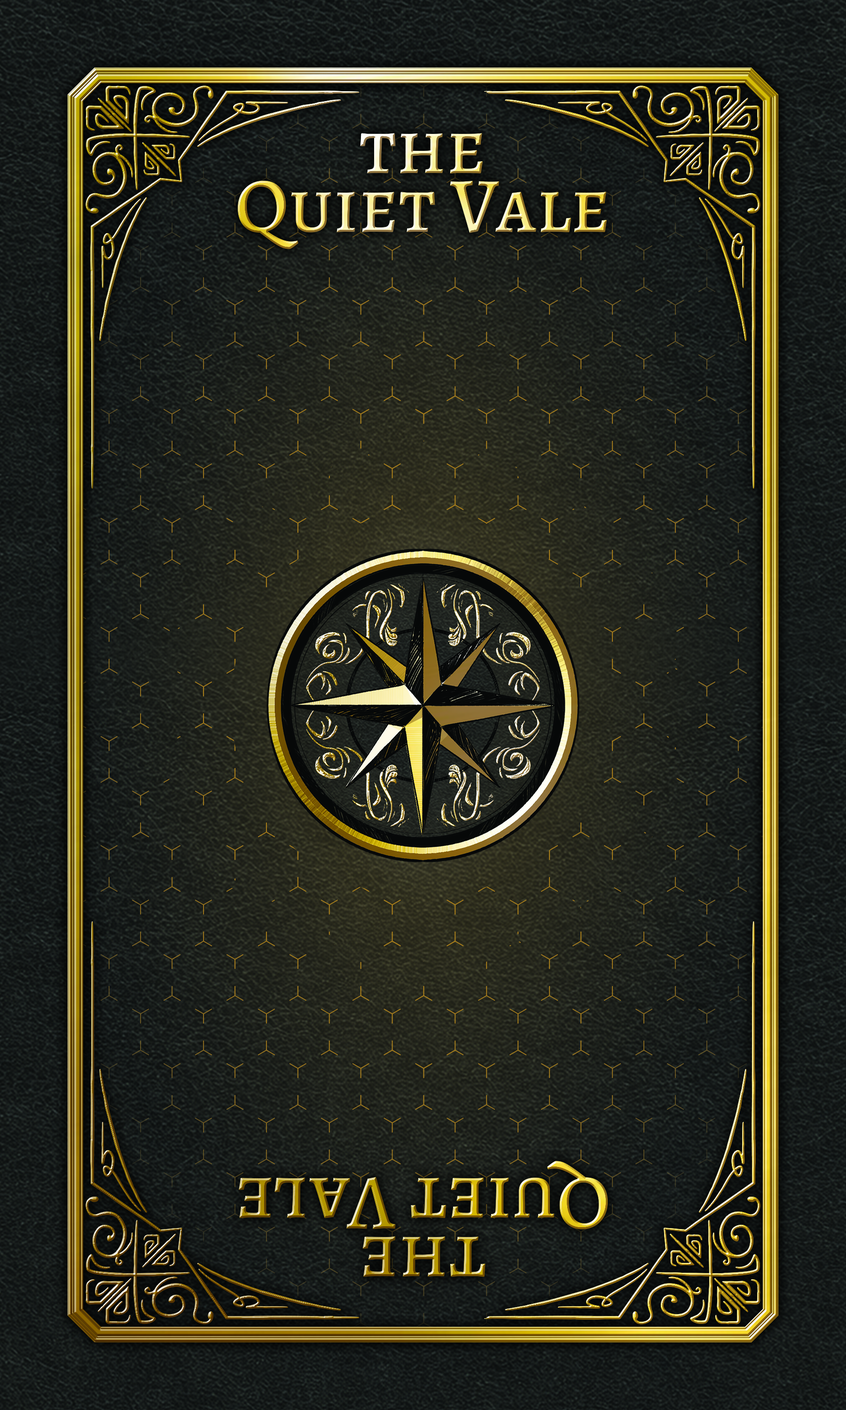
<style>
.page{position:relative;width:846px;height:1410px}
.page>*{position:absolute;margin:0}
.t1{font:78.3px/58.7px "Alegreya-Medium";font-variant:small-caps}
</style>
<div class="page">
<p class="t1" style="left:237px;top:133px;width:370px;height:116px;text-align:center">the<br>Quiet Vale</p>
<p class="t1" style="left:239px;top:1161px;width:369px;height:116px;text-align:center;rotate:180deg">the<br>Quiet Vale</p>
</div>
